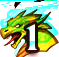
<style>
.page{position:relative;width:59px;height:57px;background:#ffffff}
.page>*{position:absolute;margin:0}
.t1{font:37.5px "ElanITCStd-Bold";font-variant:small-caps}
</style>
<div class="page">
<p class="t1" style="left:26px;top:15px;width:11px;height:26px">1</p>
</div>
